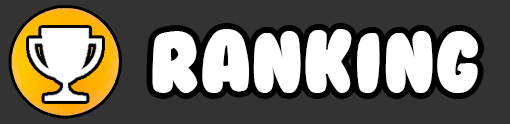
<style>
.page{position:relative;width:510px;height:124px;background:#333333}
.page>*{position:absolute;margin:0}
.t1{font:80px "BubbleGum";color:#ffffff}
</style>
<div class="page">
<p class="t1" style="left:152px;top:29px;width:326px;height:64px">Ranking</p>
</div>
